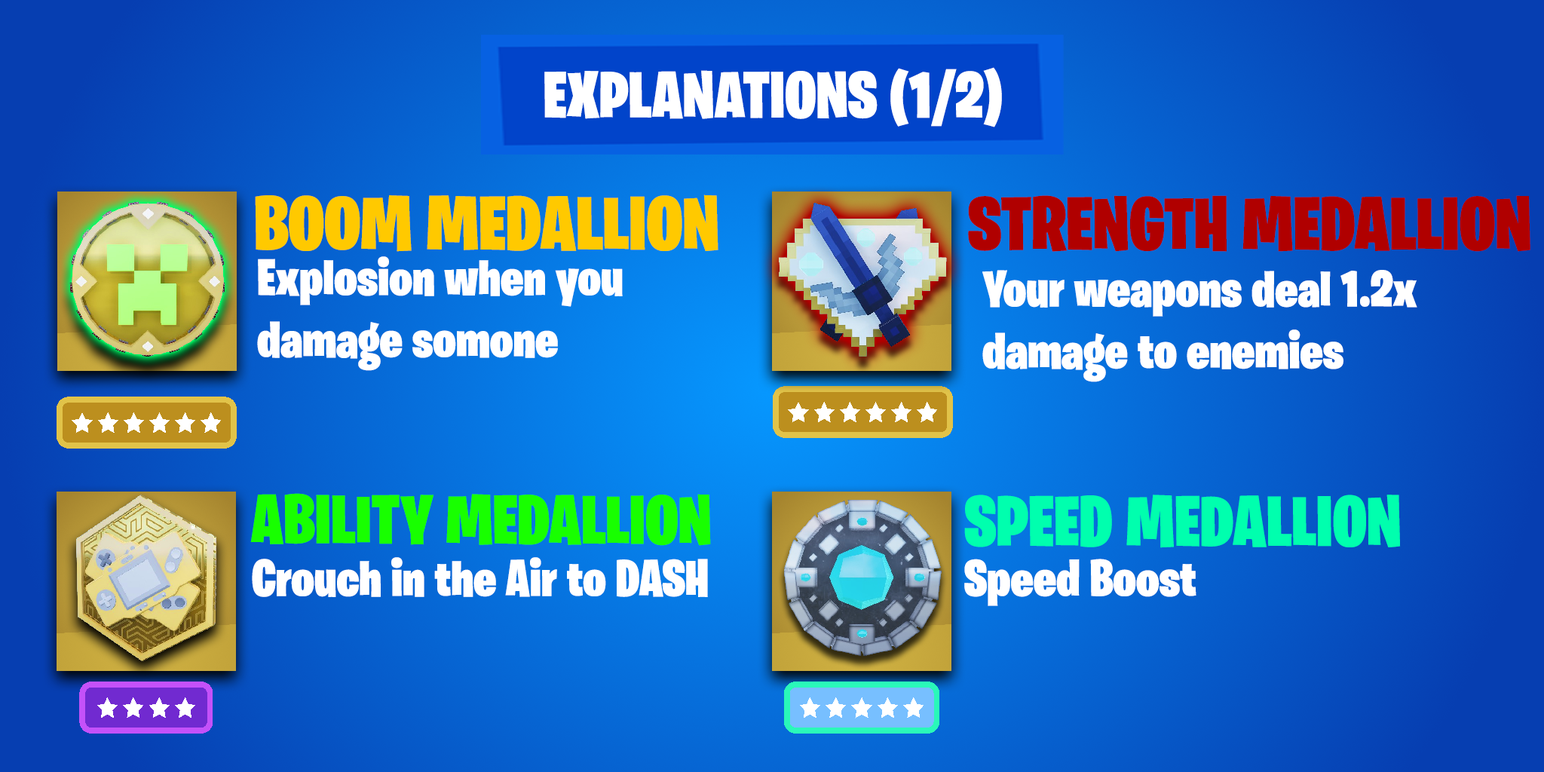
<style>
.page{position:relative;width:1544px;height:772px}
.page>*{position:absolute;margin:0}
.t1{font:65.6px "BurbankBigCondensed-Black";color:#ffffff}
.t2{font:76.1px "BurbankBigCondensed-Black";color:#ffc900}
.t3{font:75.4px "BurbankBigCondensed-Black";color:#b00000}
.t4{font:51.5px "BurbankBigCondensed-Black";color:#ffffff}
.t5{font:69.3px "BurbankBigCondensed-Black";color:#18ff00}
.t6{font:71.7px "BurbankBigCondensed-Black";color:#00ffae}
</style>
<div class="page">
<p class="t1" style="left:544px;top:67px;width:458px;height:60px">EXPLANATIONS (1/2)</p>
<p class="t2" style="left:255px;top:195px;width:464px;height:57px">BOOM MEDALLION</p>
<p class="t3" style="left:968px;top:195px;width:563px;height:57px">STRENGTH MEDALLION</p>
<p class="t4" style="left:257px;top:256px;width:366px;height:115px">Explosion when you damage somone</p>
<p class="t4" style="left:983px;top:270px;width:435px;height:112px">Your weapons deal 1.2x<br>damage to enemies</p>
<p class="t5" style="left:250px;top:493px;width:461px;height:53px">ABILITY MEDALLION</p>
<p class="t6" style="left:964px;top:495px;width:437px;height:53px">SPEED MEDALLION</p>
<p class="t4" style="left:252px;top:557px;width:456px;height:40px">Crouch in the Air to DASH</p>
<p class="t4" style="left:964px;top:559px;width:233px;height:47px">Speed Boost</p>
</div>
